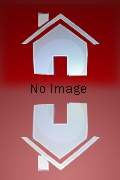
<style>
.page{position:relative;width:120px;height:180px}
.page>*{position:absolute;margin:0}
.t1{font:14px "FranklinGothic-Medium";color:#080000}
</style>
<div class="page">
<p class="t1" style="left:31px;top:84px;width:55px;height:11px">No Image</p>
</div>
